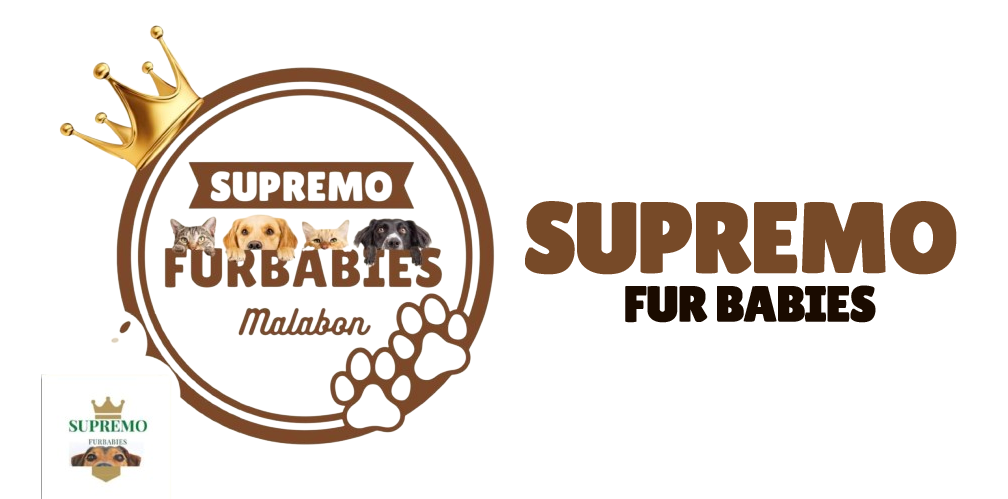
<style>
.page{position:relative;width:1008px;height:499px;background:#ffffff}
.page>*{position:absolute;margin:0}
.t1{font:100px "LilitaOne";letter-spacing:-0.04em;color:#774a28;font-weight:bold}
.t2{font:50px "LilitaOne";letter-spacing:-0.04em;color:#1a0b00;font-weight:bold}
</style>
<div class="page">
<p class="t1" style="left:525px;top:201px;width:432px;height:74px">SUPREMO</p>
<p class="t2" style="left:625px;top:285px;width:251px;height:38px">FUR BABIES</p>
</div>
